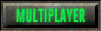
<style>
.page{position:relative;width:101px;height:31px}
.page>*{position:absolute;margin:0}
.t1{font:19px "Sunzoomspark";color:#00f646}
</style>
<div class="page">
<p class="t1" style="left:16px;top:8px;width:69px;height:16px">Multiplayer</p>
</div>
